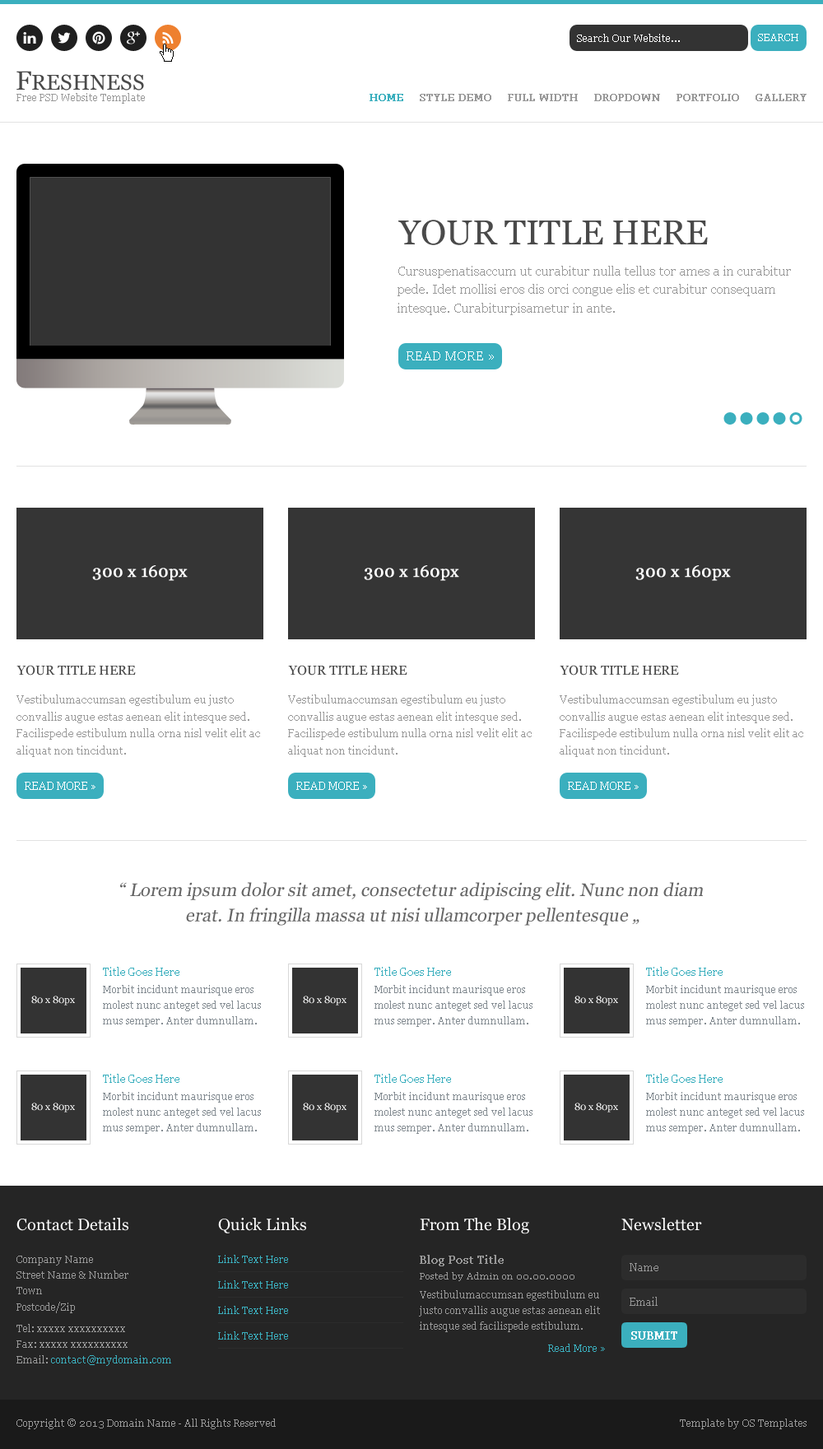
<style>
.page{position:relative;width:823px;height:1449px;background:#ffffff}
.page>*{position:absolute;margin:0}
.t1{font:9.9px "Georgia";color:#ffffff}
.t2{font:21.4px "Georgia";color:#4a4a4a}
.t3{font:26.3px "Georgia";color:#4a4a4a}
.t4{font:9.9px "Georgia";color:#999999}
.t5{font:9.9px "Georgia";color:#3bafbe;font-weight:bold}
.t6{font:9.9px "Georgia";color:#999999;font-weight:bold}
.t7{font:34.6px "Georgia";color:#4a4a4a}
.t8{font:13.2px/18.4px "Georgia";color:#999999}
.t9{font:13.2px "Georgia";color:#ffffff}
.t10{font:16.5px "Georgia";color:#ffffff;font-weight:bold}
.t11{font:13.2px "Georgia";color:#4a4a4a}
.t12{font:10.7px/17.1px "Georgia";color:#999999}
.t13{font:10.7px "Georgia";color:#ffffff}
.t14{font:18.1px/25.3px "Georgia";color:#666666;font-style:italic}
.t15{font:10.7px "Georgia";color:#3bafbe}
.t16{font:9.9px/15.8px "Georgia";color:#848c92}
.t17{font:16.5px "Georgia";color:#ffffff}
.t18{font:9.9px/15.8px "Georgia";color:#999999}
.t19{font:9.9px/21.7px "Georgia";color:#999999}
.t20{font:9.9px/15.8px "Georgia";color:#3bafbe}
.t21{font:9.9px "Georgia";color:#3bafbe}
.t22{font:10.7px "Georgia";color:#999999;font-weight:bold}
.t23{font:10.7px "Georgia";color:#989898}
.t24{font:9.1px "Georgia";color:#999999}
.t25{font:10.7px "Georgia";color:#ffffff;font-weight:bold}
</style>
<div class="page">
<p class="t1" style="left:577px;top:34px;width:103px;height:8px">Search Our Website...</p>
<p class="t1" style="left:758px;top:34px;width:40px;height:7px">SEARCH</p>
<p class="t2" style="left:16px;top:71px;width:128px;height:20px"><span class="t3">F</span>RESHNESS</p>
<p class="t4" style="left:16px;top:93px;width:129px;height:11px">Free PSD Website Template</p>
<p class="t5" style="left:369px;top:94px;width:34px;height:7px">HOME</p>
<p class="t6" style="left:420px;top:94px;width:71px;height:7px">STYLE DEMO</p>
<p class="t6" style="left:508px;top:94px;width:70px;height:7px">FULL WIDTH</p>
<p class="t6" style="left:594px;top:94px;width:66px;height:7px">DROPDOWN</p>
<p class="t6" style="left:676px;top:94px;width:63px;height:7px">PORTFOLIO</p>
<p class="t6" style="left:755px;top:94px;width:51px;height:7px">GALLERY</p>
<p class="t7" style="left:398px;top:220px;width:310px;height:25px">YOUR TITLE HERE</p>
<p class="t8" style="left:397px;top:266px;width:394px;height:49px">Cursuspenatisaccum ut curabitur nulla tellus tor ames a in curabitur pede. Idet mollisi eros dis orci congue elis et curabitur consequam intesque. Curabiturpisametur in ante.</p>
<p class="t9" style="left:407px;top:351px;width:87px;height:9px">READ MORE »</p>
<p class="t10" style="left:92px;top:565px;width:96px;height:16px">300 x 160px</p>
<p class="t10" style="left:364px;top:565px;width:95px;height:16px">300 x 160px</p>
<p class="t10" style="left:635px;top:565px;width:96px;height:16px">300 x 160px</p>
<p class="t11" style="left:16px;top:665px;width:120px;height:11px">YOUR TITLE HERE</p>
<p class="t11" style="left:288px;top:665px;width:119px;height:11px">YOUR TITLE HERE</p>
<p class="t11" style="left:560px;top:665px;width:119px;height:11px">YOUR TITLE HERE</p>
<p class="t12" style="left:16px;top:695px;width:244px;height:62px">Vestibulumaccumsan egestibulum eu justo convallis augue estas aenean elit intesque sed. Facilispede estibulum nulla orna nisl velit elit ac aliquat non tincidunt.</p>
<p class="t12" style="left:288px;top:695px;width:244px;height:62px">Vestibulumaccumsan egestibulum eu justo convallis augue estas aenean elit intesque sed. Facilispede estibulum nulla orna nisl velit elit ac aliquat non tincidunt.</p>
<p class="t12" style="left:560px;top:695px;width:243px;height:62px">Vestibulumaccumsan egestibulum eu justo convallis augue estas aenean elit intesque sed. Facilispede estibulum nulla orna nisl velit elit ac aliquat non tincidunt.</p>
<p class="t13" style="left:25px;top:782px;width:70px;height:8px">READ MORE »</p>
<p class="t13" style="left:296px;top:782px;width:71px;height:8px">READ MORE »</p>
<p class="t13" style="left:568px;top:782px;width:71px;height:8px">READ MORE »</p>
<p class="t14" style="left:120px;top:882px;width:583px;height:44px;text-align:center">“ Lorem ipsum dolor sit amet, consectetur adipiscing elit. Nunc non diam <br>erat. In fringilla massa ut nisi ullamcorper pellentesque „</p>
<p class="t15" style="left:103px;top:967px;width:76px;height:9px">Title Goes Here</p>
<p class="t15" style="left:374px;top:967px;width:77px;height:9px">Title Goes Here</p>
<p class="t15" style="left:646px;top:967px;width:76px;height:9px">Title Goes Here</p>
<p class="t16" style="left:103px;top:985px;width:158px;height:42px">Morbit incidunt maurisque eros molest nunc anteget sed vel lacus mus semper. Anter dumnullam.</p>
<p class="t16" style="left:374px;top:985px;width:158px;height:42px">Morbit incidunt maurisque eros molest nunc anteget sed vel lacus mus semper. Anter dumnullam.</p>
<p class="t16" style="left:646px;top:985px;width:158px;height:42px">Morbit incidunt maurisque eros molest nunc anteget sed vel lacus mus semper. Anter dumnullam.</p>
<p class="t1" style="left:31px;top:996px;width:44px;height:10px">80 x 80px</p>
<p class="t1" style="left:303px;top:996px;width:43px;height:10px">80 x 80px</p>
<p class="t1" style="left:574px;top:996px;width:44px;height:10px">80 x 80px</p>
<p class="t15" style="left:103px;top:1074px;width:76px;height:9px">Title Goes Here</p>
<p class="t15" style="left:374px;top:1074px;width:77px;height:9px">Title Goes Here</p>
<p class="t15" style="left:646px;top:1074px;width:76px;height:9px">Title Goes Here</p>
<p class="t16" style="left:103px;top:1092px;width:158px;height:42px">Morbit incidunt maurisque eros molest nunc anteget sed vel lacus mus semper. Anter dumnullam.</p>
<p class="t16" style="left:374px;top:1092px;width:158px;height:42px">Morbit incidunt maurisque eros molest nunc anteget sed vel lacus mus semper. Anter dumnullam.</p>
<p class="t16" style="left:646px;top:1092px;width:158px;height:42px">Morbit incidunt maurisque eros molest nunc anteget sed vel lacus mus semper. Anter dumnullam.</p>
<p class="t1" style="left:31px;top:1103px;width:44px;height:10px">80 x 80px</p>
<p class="t1" style="left:303px;top:1103px;width:43px;height:10px">80 x 80px</p>
<p class="t1" style="left:574px;top:1103px;width:44px;height:10px">80 x 80px</p>
<p class="t17" style="left:16px;top:1218px;width:112px;height:13px">Contact Details</p>
<p class="t17" style="left:218px;top:1218px;width:88px;height:15px">Quick Links</p>
<p class="t17" style="left:420px;top:1218px;width:109px;height:16px">From The Blog</p>
<p class="t17" style="left:621px;top:1218px;width:81px;height:13px">Newsletter</p>
<p class="t18" style="left:16px;top:1256px;width:155px;height:110px">Company Name<br>Street Name &amp; Number<br>Town<br>Postcode/Zip<span class="t19"><br>Tel: xxxxx xxxxxxxxxx<br></span>Fax: xxxxx xxxxxxxxxx<br>Email: <span class="t20">contact@mydomain.com</span></p>
<p class="t21" style="left:218px;top:1255px;width:70px;height:8px">Link Text Here</p>
<p class="t22" style="left:420px;top:1255px;width:84px;height:11px">Blog Post Title</p>
<p class="t23" style="left:630px;top:1263px;width:28px;height:8px">Name</p>
<p class="t24" style="left:420px;top:1272px;width:154px;height:9px">Posted by Admin on 00.00.0000</p>
<p class="t21" style="left:218px;top:1280px;width:70px;height:9px">Link Text Here</p>
<p class="t18" style="left:419px;top:1290px;width:181px;height:42px">Vestibulumaccumsan egestibulum eu justo convallis augue estas aenean elit intesque sed facilispede estibulum.</p>
<p class="t23" style="left:630px;top:1297px;width:27px;height:9px">Email</p>
<p class="t21" style="left:218px;top:1306px;width:70px;height:8px">Link Text Here</p>
<p class="t21" style="left:218px;top:1331px;width:70px;height:9px">Link Text Here</p>
<p class="t25" style="left:631px;top:1331px;width:46px;height:9px">SUBMIT</p>
<p class="t21" style="left:548px;top:1344px;width:57px;height:8px">Read More »</p>
<p class="t4" style="left:16px;top:1419px;width:260px;height:10px">Copyright © 2013 Domain Name - All Rights Reserved</p>
<p class="t4" style="left:680px;top:1419px;width:126px;height:10px">Template by OS Templates</p>
</div>
